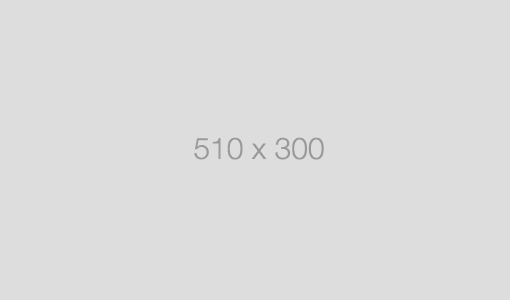
<style>
.page{position:relative;width:510px;height:300px;background:#dddddd}
.page>*{position:absolute;margin:0}
.t1{font:30px "HelveticaNeue-Light";color:#999999}
</style>
<div class="page">
<p class="t1" style="left:194px;top:137px;width:130px;height:23px">510 x 300</p>
</div>
